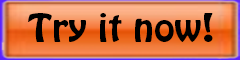
<style>
.page{position:relative;width:240px;height:60px}
.page>*{position:absolute;margin:0}
.t1{font:34.2px "HoboStd";color:#000000;scale:1.1 1}
</style>
<div class="page">
<p class="t1" style="left:28px;top:13px;width:185px;height:29px">Try it now!</p>
</div>
